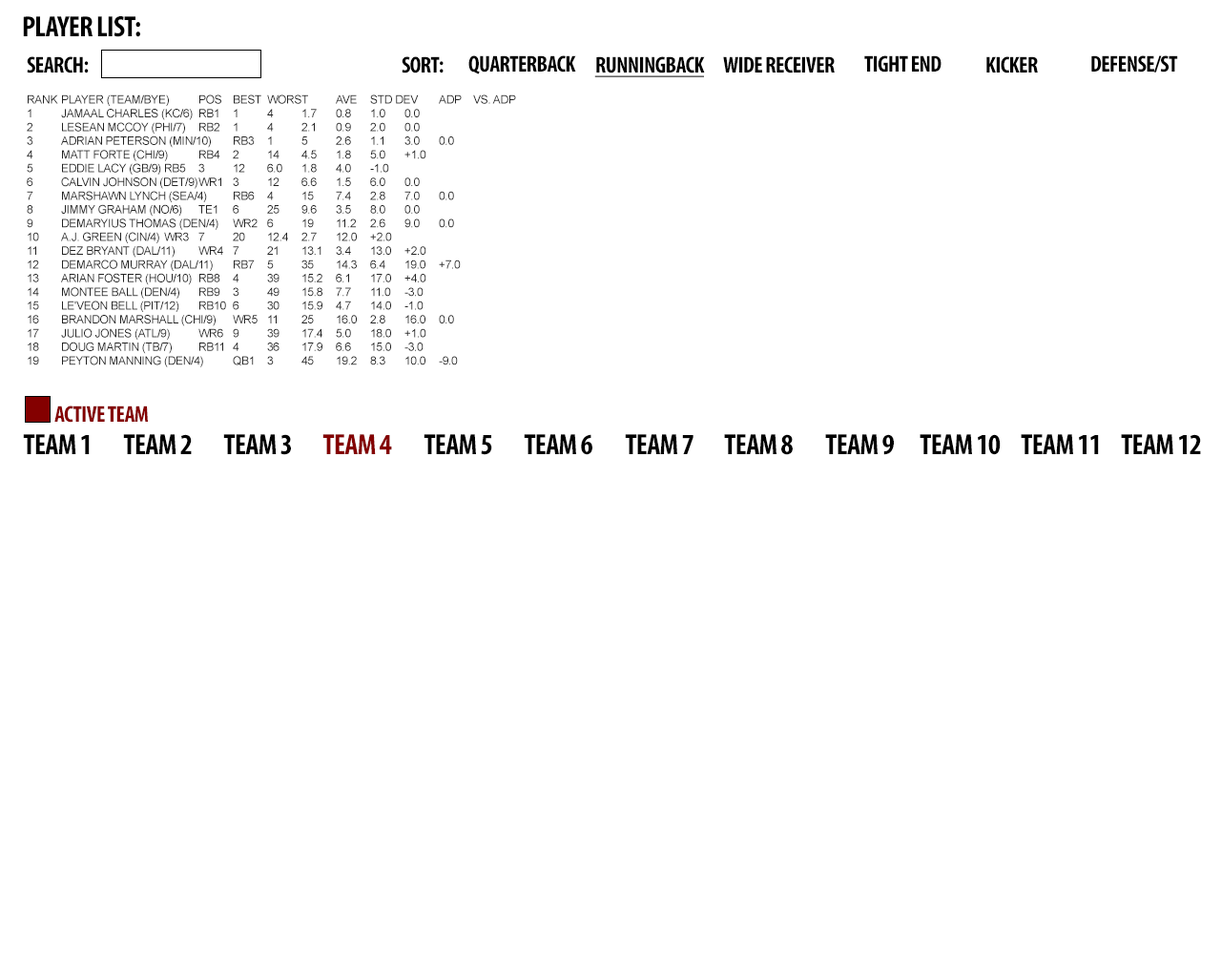
<style>
.page{position:relative;width:1221px;height:977px;background:#ffffff}
.page>*{position:absolute;margin:0}
.t1{font:29.5px "MyriadPro-BoldCond";letter-spacing:-0.025em;color:#000000;text-transform:uppercase}
.t2{font:22.9px "MyriadPro-BoldCond";letter-spacing:-0.025em;color:#000000;text-transform:uppercase}
.t3{font:22.9px "MyriadPro-BoldCond";letter-spacing:-0.025em;color:#000000;text-transform:uppercase;text-decoration:underline}
.t4{font:11.4px "ArialMT";letter-spacing:-0.025em;color:#222222;text-transform:uppercase}
.t5{font:22.9px "MyriadPro-BoldCond";letter-spacing:-0.025em;color:#840000;text-transform:uppercase}
.t6{font:29.2px "MyriadPro-BoldCond";letter-spacing:-0.025em;color:#000000;text-transform:uppercase}
.t7{font:29.2px "MyriadPro-BoldCond";letter-spacing:-0.025em;color:#840000;text-transform:uppercase}
</style>
<div class="page">
<p class="t1" style="left:23px;top:16px;width:117px;height:21px">player list:</p>
<p class="t2" style="left:27px;top:56px;width:62px;height:17px">search:</p>
<p class="t2" style="left:402px;top:56px;width:42px;height:17px">sort:</p>
<p class="t2" style="left:468px;top:55px;width:108px;height:19px">quarterback</p>
<p class="t3" style="left:594px;top:56px;width:111px;height:21px">runningback</p>
<p class="t2" style="left:723px;top:56px;width:112px;height:17px">wide receiver</p>
<p class="t2" style="left:864px;top:55px;width:77px;height:17px">tight end</p>
<p class="t2" style="left:986px;top:56px;width:52px;height:17px">kicker</p>
<p class="t2" style="left:1091px;top:55px;width:87px;height:17px">defense/ST</p>
<p class="t4" style="left:27px;top:94px;width:489px;height:273px">Rank Player (team/bye) Pos Best Worst Ave Std Dev ADP vs. ADP<br>1 Jamaal Charles (KC/6) RB1 1 4 1.7 0.8 1.0 0.0<br>2 LeSean McCoy (PHI/7) RB2 1 4 2.1 0.9 2.0 0.0<br>3 Adrian Peterson (MIN/10) RB3 1 5 2.6 1.1 3.0 0.0<br>4 Matt Forte (CHI/9) RB4 2 14 4.5 1.8 5.0 +1.0<br>5 Eddie Lacy (GB/9) RB5 3 12 6.0 1.8 4.0 -1.0<br>6 Calvin Johnson (DET/9) WR1 3 12 6.6 1.5 6.0 0.0<br>7 Marshawn Lynch (SEA/4) RB6 4 15 7.4 2.8 7.0 0.0<br>8 Jimmy Graham (NO/6) TE1 6 25 9.6 3.5 8.0 0.0<br>9 Demaryius Thomas (DEN/4) WR2 6 19 11.2 2.6 9.0 0.0<br>10 A.J. Green (CIN/4) WR3 7 20 12.4 2.7 12.0 +2.0<br>11 Dez Bryant (DAL/11) WR4 7 21 13.1 3.4 13.0 +2.0<br>12 DeMarco Murray (DAL/11) RB7 5 35 14.3 6.4 19.0 +7.0<br>13 Arian Foster (HOU/10) RB8 4 39 15.2 6.1 17.0 +4.0<br>14 Montee Ball (DEN/4) RB9 3 49 15.8 7.7 11.0 -3.0<br>15 Le'Veon Bell (PIT/12) RB10 6 30 15.9 4.7 14.0 -1.0<br>16 Brandon Marshall (CHI/9) WR5 11 25 16.0 2.8 16.0 0.0<br>17 Julio Jones (ATL/9) WR6 9 39 17.4 5.0 18.0 +1.0<br>18 Doug Martin (TB/7) RB11 4 36 17.9 6.6 15.0 -3.0<br>19 Peyton Manning (DEN/4) QB1 3 45 19.2 8.3 10.0 -9.0<br>20 Giovani Bernard (CIN/4) RB12 8 38 20.7 6.0 23.0 +3.0<br>21 Zac Stacy (STL/4) RB13 7 64 21.6 10.0 20.0 -1.0<br>22 Alshon Jeffery (CHI/9) WR7 16 38 23.7 4.6 25.0 +3.0<br>23 Alfred Morris (WAS/10) RB14 10 61 24.3 8.2 24.0 +1.0<br>24 Aaron Rodgers (GB/9) QB2 7 50 25.4 8.4 22.0 -2.0<br>25 Jordy Nelson (GB/9) WR8 18 50 25.9 6.3 26.0 +1.0<br>26 Antonio Brown (PIT/12) WR9 18 45 26.1 5.0 27.0 +1.0<br>27 Drew Brees (NO/6) QB3 8 50 26.5 8.6 21.0 -6.0<br>28 Randall Cobb (GB/9) WR10 17 88 31.2 9.0 28.0 0.0<br>29 Andre Ellington (ARI/4) RB15 18 69 33.2 8.9 38.0 +9.0<br>30 C.J. Spiller (BUF/9) RB16 18 74 33.8 12.3 37.0 +7.0</p>
<p class="t5" style="left:54px;top:405px;width:94px;height:18px">active team</p>
<p class="t6" style="left:23px;top:434px;width:67px;height:20px">Team 1</p>
<p class="t6" style="left:123px;top:434px;width:69px;height:20px">Team 2</p>
<p class="t6" style="left:223px;top:434px;width:68px;height:21px">Team 3</p>
<p class="t7" style="left:322px;top:434px;width:70px;height:20px">Team 4</p>
<p class="t6" style="left:423px;top:434px;width:69px;height:21px">Team 5</p>
<p class="t6" style="left:524px;top:434px;width:68px;height:21px">Team 6</p>
<p class="t6" style="left:625px;top:434px;width:68px;height:20px">Team 7</p>
<p class="t6" style="left:724px;top:434px;width:69px;height:21px">Team 8</p>
<p class="t6" style="left:825px;top:434px;width:69px;height:21px">Team 9</p>
<p class="t6" style="left:919px;top:434px;width:82px;height:21px">Team 10</p>
<p class="t6" style="left:1021px;top:434px;width:78px;height:20px">Team 11</p>
<p class="t6" style="left:1121px;top:434px;width:80px;height:20px">Team 12</p>
</div>
